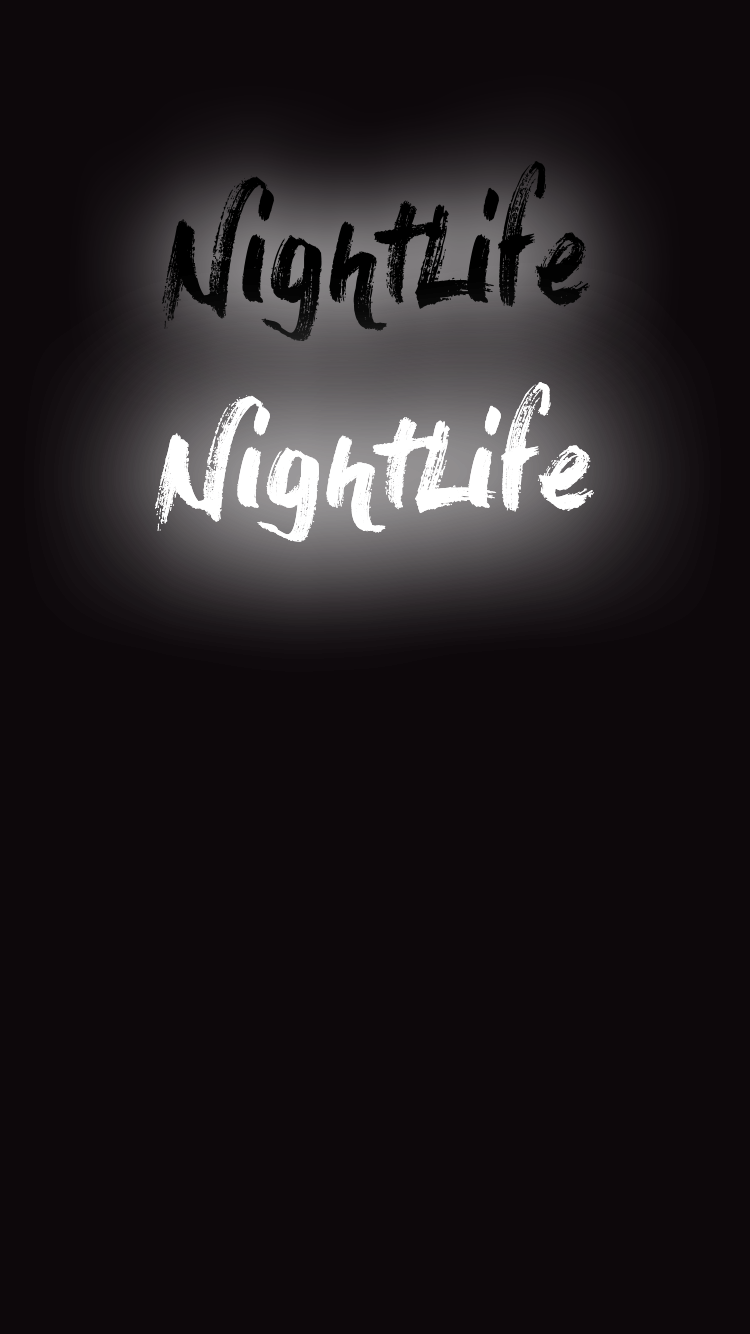
<style>
.page{position:relative;width:750px;height:1334px;background:#0d080b}
.page>*{position:absolute;margin:0}
.t1{font:116.7px "DryBrush";color:#ffffff}
</style>
<div class="page">
<p class="t1" style="left:155px;top:382px;width:439px;height:160px">NightLife</p>
</div>
